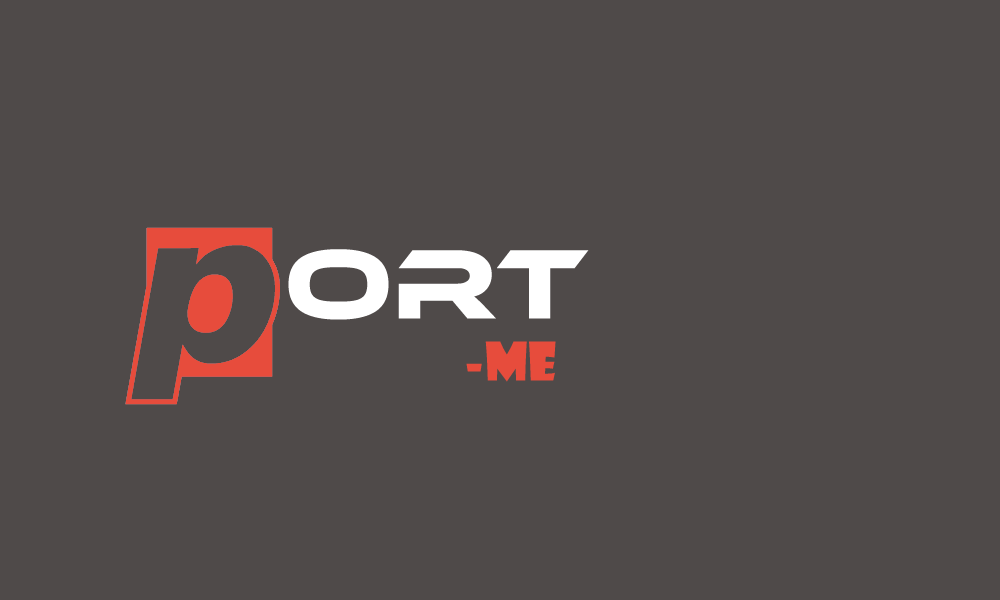
<style>
.page{position:relative;width:1000px;height:600px;background:#4f4a49}
.page>*{position:absolute;margin:0}
.t1{font:102px "EthnocentricRg-Regular";color:#ffffff}
.t2{font:52px "ShowcardGothic-Reg";color:#e74c3c}
</style>
<div class="page">
<p class="t1" style="left:288px;top:249px;width:301px;height:71px">ORT</p>
<p class="t2" style="left:466px;top:341px;width:90px;height:41px">-me</p>
</div>
